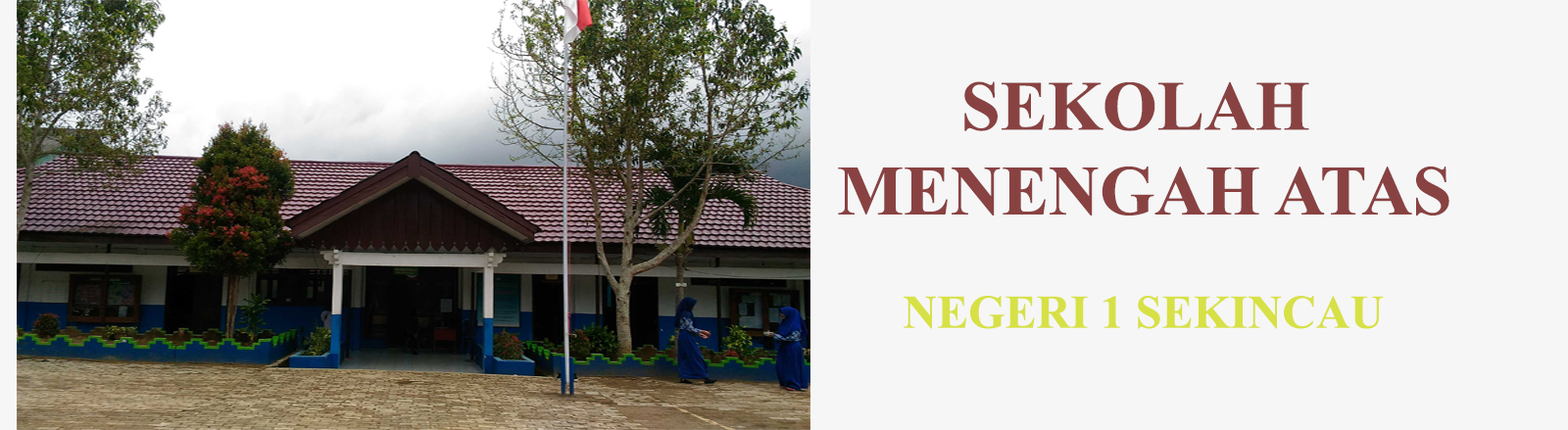
<style>
.page{position:relative;width:1568px;height:430px;background:#f6f6f6}
.page>*{position:absolute;margin:0}
.t1{font:70.6px "TimesNewRomanPS-BoldMT";color:#894242}
.t2{font:47px "TimesNewRomanPS-BoldMT";color:#d7e146}
</style>
<div class="page">
<p class="t1" style="left:838px;top:81px;width:611px;height:135px;text-align:center">SEKOLAH <br>MENENGAH ATAS</p>
<p class="t2" style="left:904px;top:296px;width:480px;height:33px">NEGERI 1 SEKINCAU</p>
</div>
